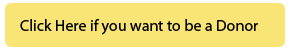
<style>
.page{position:relative;width:290px;height:50px;background:#f9e576}
.page>*{position:absolute;margin:0}
.t1{font:16px "MyriadPro-Regular";color:#000000}
</style>
<div class="page">
<p class="t1" style="left:20px;top:19px;width:238px;height:16px">Click Here if you want to be a Donor</p>
</div>
